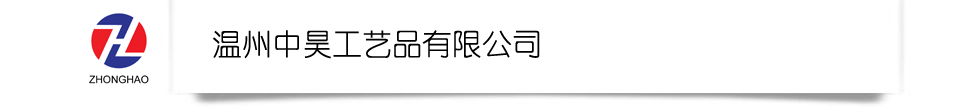
<style>
.page{position:relative;width:960px;height:108px;background:#ffffff}
.page>*{position:absolute;margin:0}
.t1{font:30px "YouYuan";color:#000000}
</style>
<div class="page">
<p class="t1" style="left:213px;top:30px;width:327px;height:29px">温州中昊工艺品有限公司</p>
</div>
